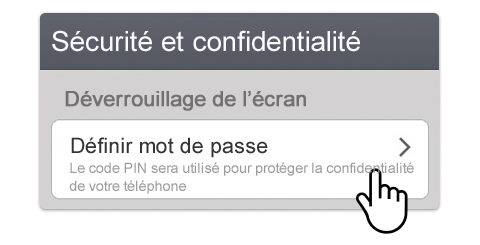
<style>
.page{position:relative;width:480px;height:245px;background:#ffffff}
.page>*{position:absolute;margin:0}
.t1{font:28.1px "ArialMT";color:#f9fafe}
.t2{font:21px "ArialMT";color:#727071;font-weight:bold}
.t3{font:21.1px "ArialMT";color:#353535}
.t4{font:14.2px "ArialMT";color:#9c9c9c}
</style>
<div class="page">
<p class="t1" style="left:52px;top:30px;width:308px;height:22px">Sécurité et confidentialité</p>
<p class="t2" style="left:65px;top:91px;width:241px;height:20px">Déverrouillage de l’écran</p>
<p class="t3" style="left:71px;top:137px;width:197px;height:21px">Définir mot de passe</p>
<p class="t4" style="left:69px;top:162px;width:345px;height:32px">Le code PIN sera utilisé pour protéger la confidentialité <br>de votre téléphone</p>
</div>
